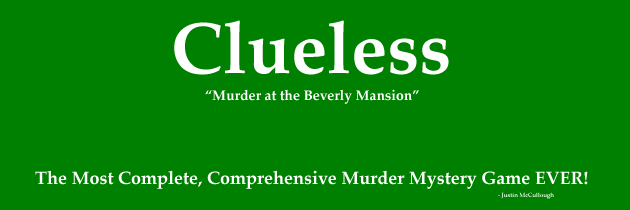
<style>
.page{position:relative;width:630px;height:210px;background:#008000}
.page>*{position:absolute;margin:0}
.t1{font:72px "PalatinoLinotype-Bold";color:#ffffff}
.t2{font:14px "PalatinoLinotype-Bold";color:#ffffff}
.t3{font:18px "PalatinoLinotype-Bold";color:#ffffff}
.t4{font:6px "PalatinoLinotype-Bold"}
</style>
<div class="page">
<p class="t1" style="left:174px;top:20px;width:275px;height:55px">Clueless</p>
<p class="t2" style="left:205px;top:89px;width:214px;height:15px">“Murder at the Beverly Mansion”</p>
<p class="t3" style="left:35px;top:170px;width:553px;height:19px">The Most Complete, Comprehensive Murder Mystery Game EVER!</p>
<p class="t4" style="left:498px;top:192px;width:56px;height:7px">- Justin McCullough</p>
</div>
